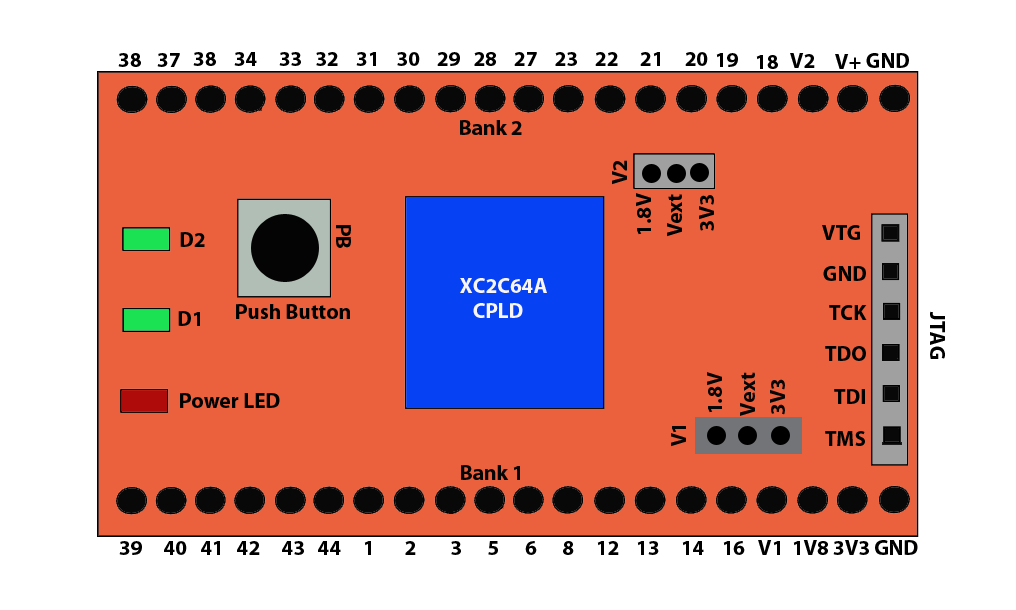
<style>
.page{position:relative;width:1016px;height:610px;background:#eb613d}
.page>*{position:absolute;margin:0}
.t1{font:21.2px "MyriadPro-Bold";color:#000000}
.t2{font:21.2px "MyriadPro-Bold";color:#060606}
.t3{font:21.2px "MyriadPro-Bold";color:#f9f5f5}
</style>
<div class="page">
<p class="t1" style="left:118px;top:53px;width:23px;height:14px">38</p>
<p class="t1" style="left:157px;top:53px;width:23px;height:14px">37</p>
<p class="t1" style="left:193px;top:52px;width:23px;height:14px">38</p>
<p class="t1" style="left:234px;top:52px;width:474px;height:14px">34     33   32    31    30    29   28    27    23    22     21     20</p>
<p class="t1" style="left:716px;top:53px;width:22px;height:14px">19</p>
<p class="t1" style="left:790px;top:53px;width:25px;height:15px">V2</p>
<p class="t1" style="left:835px;top:54px;width:26px;height:15px">V+</p>
<p class="t1" style="left:866px;top:53px;width:43px;height:15px">GND</p>
<p class="t1" style="left:756px;top:55px;width:22px;height:14px">18</p>
<p class="t2" style="left:460px;top:120px;width:62px;height:15px">Bank 2</p>
<p class="t2" style="left:612px;top:160px;width:15px;height:25px;rotate:-90deg">V2</p>
<p class="t1" style="left:636px;top:193px;width:15px;height:42px;rotate:-90deg">1.8V</p>
<p class="t1" style="left:667px;top:194px;width:15px;height:43px;rotate:-90deg">Vext</p>
<p class="t1" style="left:699px;top:195px;width:15px;height:36px;rotate:-90deg">3V3</p>
<p class="t1" style="left:180px;top:232px;width:25px;height:15px">D2</p>
<p class="t1" style="left:336px;top:225px;width:15px;height:23px;rotate:90deg">PB</p>
<p class="t1" style="left:822px;top:225px;width:38px;height:15px">VTG</p>
<p class="t1" style="left:823px;top:266px;width:43px;height:15px">GND</p>
<p class="t3" style="left:460px;top:278px;width:87px;height:40px">XC2C64A<br>   CPLD</p>
<p class="t1" style="left:236px;top:304px;width:114px;height:15px">Push Button</p>
<p class="t1" style="left:829px;top:305px;width:38px;height:15px">TCK</p>
<p class="t1" style="left:178px;top:311px;width:22px;height:15px">D1</p>
<p class="t1" style="left:930px;top:311px;width:15px;height:48px;rotate:90deg">JTAG</p>
<p class="t1" style="left:825px;top:346px;width:41px;height:15px">TDO</p>
<p class="t2" style="left:707px;top:372px;width:15px;height:41px;rotate:-90deg">1.8V</p>
<p class="t2" style="left:740px;top:372px;width:15px;height:44px;rotate:-90deg">Vext</p>
<p class="t2" style="left:770px;top:379px;width:15px;height:36px;rotate:-90deg">3V3</p>
<p class="t1" style="left:834px;top:389px;width:31px;height:15px">TDI</p>
<p class="t1" style="left:180px;top:393px;width:100px;height:15px">Power LED</p>
<p class="t2" style="left:671px;top:426px;width:15px;height:21px;rotate:-90deg">V1</p>
<p class="t1" style="left:825px;top:431px;width:40px;height:15px">TMS</p>
<p class="t2" style="left:461px;top:465px;width:59px;height:15px">Bank 1</p>
<p class="t1" style="left:119px;top:540px;width:799px;height:15px">39     40   41   42     43   44     1       2        3      5      6      8     12    13     14    16   V1  1V8 3V3 GND</p>
</div>
